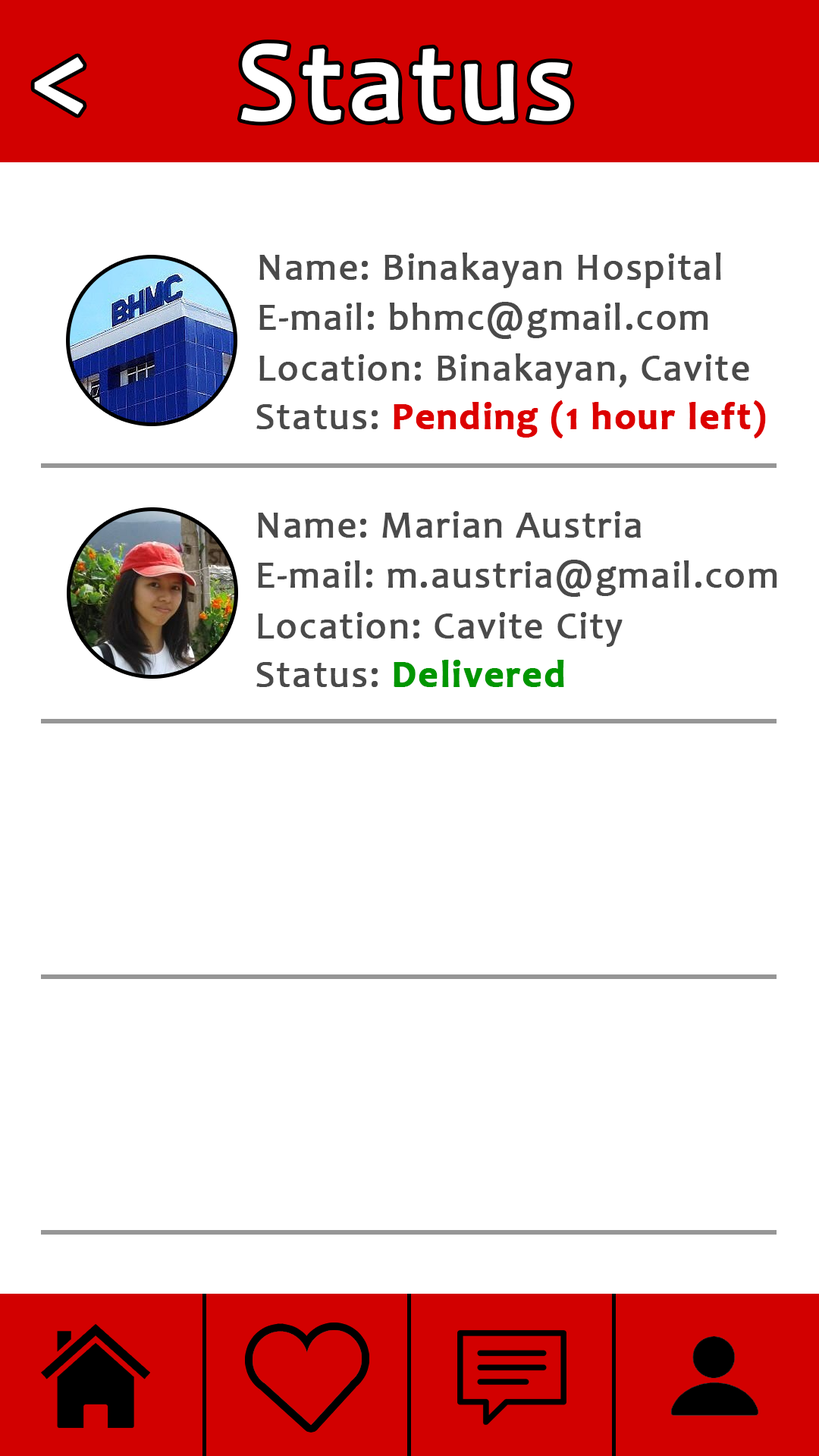
<style>
.page{position:relative;width:819px;height:1456px;background:#ffffff}
.page>*{position:absolute;margin:0}
.t1{font:113.4px "Candara";letter-spacing:0.03em;color:#ffffff;font-weight:bold}
.t2{font:113.7px "Candara";letter-spacing:0.03em;color:#ffffff;font-weight:bold}
.t3{font:37.9px "Candara";letter-spacing:0.03em;color:#4a4a4a;font-weight:bold}
.t4{font:37.9px "Candara-Bold";letter-spacing:0.03em;color:#dc0000;font-weight:bold}
.t5{font:37.9px "Candara-Bold";letter-spacing:0.03em;color:#009600;font-weight:bold}
</style>
<div class="page">
<p class="t1" style="left:240px;top:43px;width:331px;height:79px">Status</p>
<p class="t2" style="left:34px;top:57px;width:49px;height:58px">&lt;</p>
<p class="t3" style="left:259px;top:253px;width:462px;height:35px">Name: Binakayan Hospital</p>
<p class="t3" style="left:259px;top:302px;width:449px;height:37px">E-mail: bhmc@gmail.com</p>
<p class="t3" style="left:259px;top:353px;width:490px;height:36px">Location: Binakayan, Cavite</p>
<p class="t4" style="left:256px;top:400px;width:510px;height:38px"><span class="t3">Status: </span>Pending (1 hour left)</p>
<p class="t3" style="left:258px;top:511px;width:383px;height:27px">Name: Marian Austria</p>
<p class="t3" style="left:258px;top:560px;width:519px;height:37px">E-mail: m.austria@gmail.com</p>
<p class="t3" style="left:258px;top:612px;width:365px;height:35px">Location: Cavite City</p>
<p class="t5" style="left:256px;top:660px;width:308px;height:27px"><span class="t3">Status: </span>Delivered</p>
</div>
